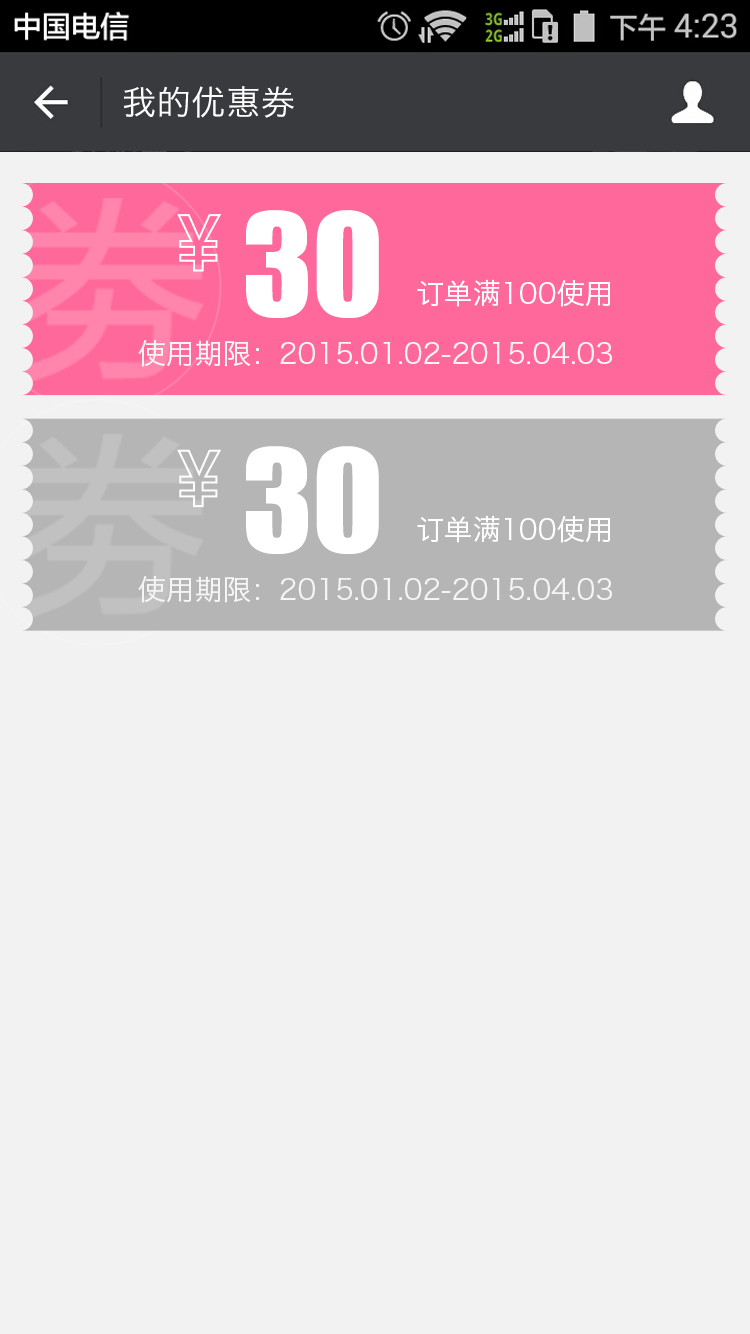
<style>
.page{position:relative;width:750px;height:1334px;background:#f2f2f2}
.page>*{position:absolute;margin:0}
.t1{font:34px "HiraginoSansGB-W3";letter-spacing:0.022em;color:#ffffff}
.t2{font:131.3px "Impact";color:#ffffff}
.t3{font:28.3px "HiraginoSansGB-W3";color:#ffffff}
.t4{font:37.7px "HiraginoSansGB-W3";color:#ffffff;font-weight:bold}
.t5{font:28.3px "HiraginoSansGB-W3";color:#f4f5f7}
</style>
<div class="page">
<p class="t1" style="left:123px;top:86px;width:171px;height:32px">我的优惠券</p>
<p class="t2" style="left:246px;top:210px;width:133px;height:108px">30</p>
<p class="t3" style="left:417px;top:279px;width:194px;height:28px"><span class="t4"><br></span>订单满100使用</p>
<p class="t5" style="left:138px;top:340px;width:474px;height:27px">使用期限：2015.01.02-2015.04.03</p>
<p class="t2" style="left:246px;top:446px;width:133px;height:108px">30</p>
<p class="t3" style="left:417px;top:515px;width:194px;height:28px"><span class="t4"><br></span>订单满100使用</p>
<p class="t5" style="left:138px;top:576px;width:474px;height:27px">使用期限：2015.01.02-2015.04.03</p>
</div>
